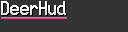
<style>
.page{position:relative;width:128px;height:32px;background:#333333}
.page>*{position:absolute;margin:0}
.t1{font:17px "EASVHS"}
</style>
<div class="page">
<p class="t1" style="left:1px;top:1px;width:65px;height:14px">DeerHud</p>
</div>
